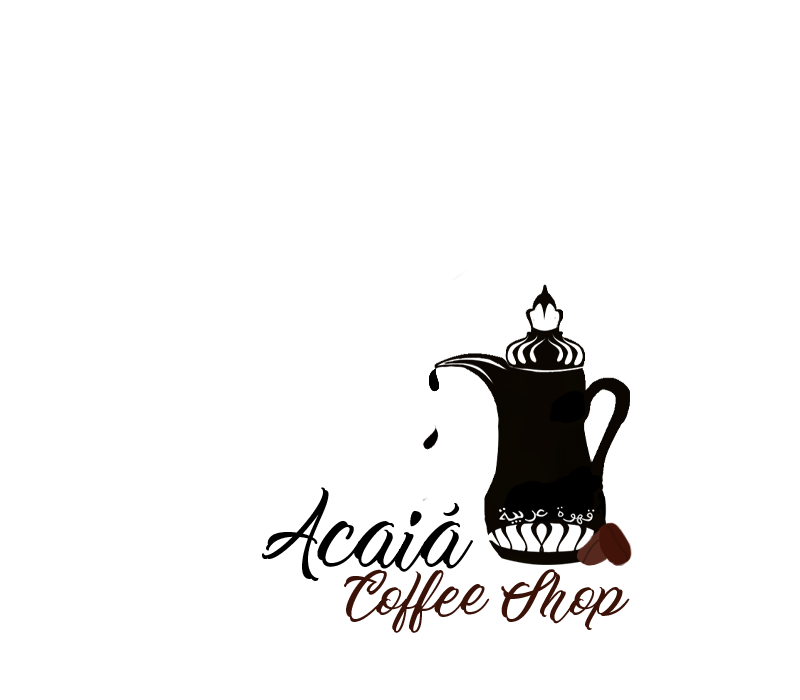
<style>
.page{position:relative;width:800px;height:700px;background:#ffffff}
.page>*{position:absolute;margin:0}
.t1{font:72px "WorkInProgress";color:#000000}
.t2{font:48px "WorkInProgress";color:#3a1208}
</style>
<div class="page">
<p class="t1" style="left:262px;top:487px;width:211px;height:94px">Acaiá</p>
<p class="t2" style="left:344px;top:569px;width:286px;height:64px">Coffee Shop</p>
</div>
